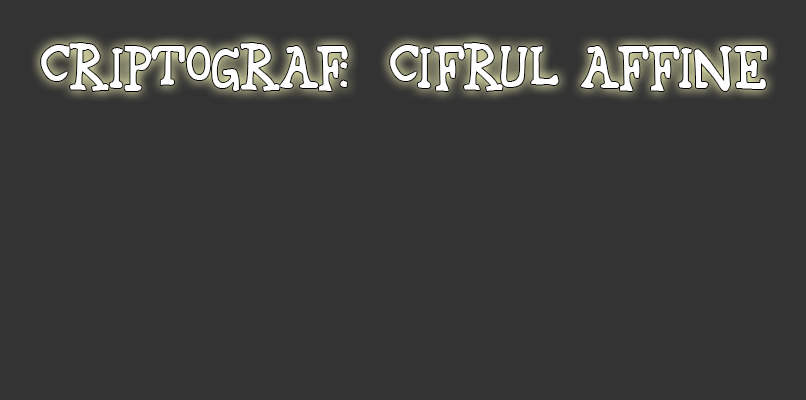
<style>
.page{position:relative;width:806px;height:400px;background:#333333}
.page>*{position:absolute;margin:0}
.t1{font:50px "42";color:#ffffff}
</style>
<div class="page">
<p class="t1" style="left:41px;top:43px;width:726px;height:48px">Criptograf:  cifrul Affine</p>
</div>
